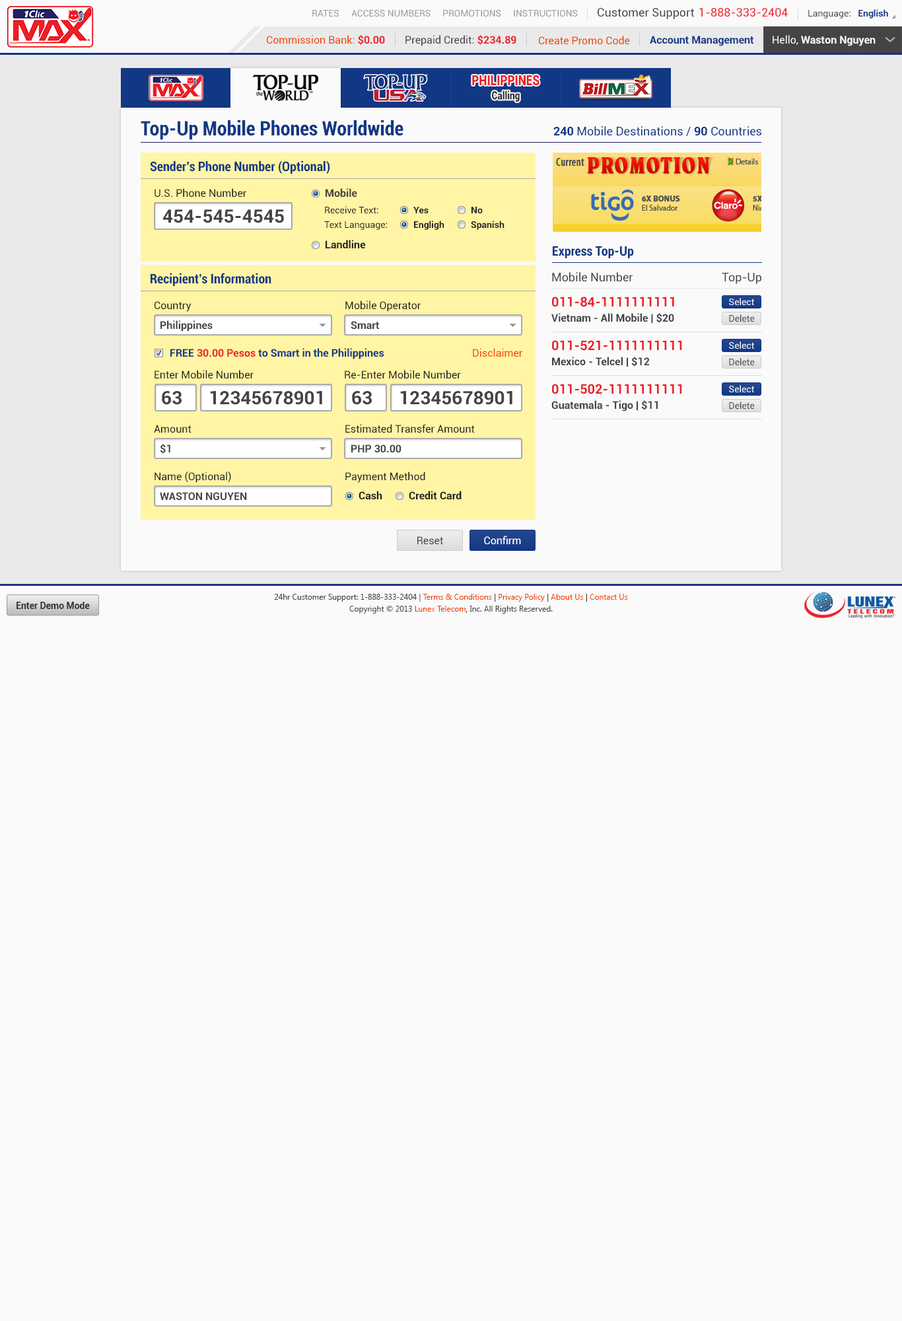
<style>
.page{position:relative;width:902px;height:1321px;background:#fafafa}
.page>*{position:absolute;margin:0}
.t1{font:9.2px "Roboto-Regular";color:#999999}
.t2{font:11.6px "Roboto-Regular";color:#444444}
.t3{font:11.6px "Roboto-Regular";color:#ec2029}
.t4{font:9.2px "Roboto-Regular";color:#444444}
.t5{font:9.2px "Roboto-Bold";color:#123785}
.t6{font:10.6px "Roboto-Regular";color:#ee4400}
.t7{font:10.6px "Roboto-Bold";color:#ec2028}
.t8{font:10.6px "Roboto-Regular";color:#444444}
.t9{font:10.6px "Roboto-Bold";color:#123785}
.t10{font:10.6px "Roboto-Bold";color:#fafafa}
.t11{font:10.6px "Roboto-Regular";color:#fafafa}
.t12{font:14.1px "Roboto-Black";color:#ec2028;scale:0.81 1}
.t13{font:11.3px "Roboto-Black";color:#333333;scale:0.81 1}
.t14{font:19.8px "Roboto-BoldCondensed";color:#123785}
.t15{font:11.9px "Roboto-Regular";color:#123785}
.t16{font:11.9px "Roboto-Bold";color:#123785}
.t17{font:13.2px "Roboto-BoldCondensed";color:#123785}
.t18{font:10.6px "Roboto-Regular";color:#222222}
.t19{font:10.6px "Roboto-Bold";color:#444444}
.t20{font:18.5px "Roboto-Bold";color:#444444}
.t21{font:9.2px "Roboto-Regular";color:#222222}
.t22{font:9.2px "Roboto-Bold";color:#222222}
.t23{font:10.6px "Roboto-Bold";color:#222222}
.t24{font:11.9px "Roboto-Regular";color:#444444}
.t25{font:13.2px "Roboto-Bold";color:#ec2129}
.t26{font:9.2px "Roboto-Regular";color:#fafafa}
.t27{font:10.6px "Roboto-Regular";color:#ffffff}
.t28{font:7.9px/11.9px "SegoeUI";color:#444444}
.t29{font:7.9px/11.9px "SegoeUI";color:#ee4400}
.t30{font:7.9px/11.9px "SegoeUI";color:#333333}
.t31{font:9.2px "Roboto-Bold";color:#333333}
</style>
<div class="page">
<p class="t1" style="left:312px;top:10px;width:27px;height:7px">RATES</p>
<p class="t1" style="left:351px;top:10px;width:80px;height:7px">ACCESS NUMBERS</p>
<p class="t1" style="left:443px;top:10px;width:58px;height:7px">PROMOTIONS</p>
<p class="t1" style="left:514px;top:10px;width:64px;height:7px">INSTRUCTIONS</p>
<p class="t2" style="left:598px;top:8px;width:96px;height:11px">Customer Support</p>
<p class="t3" style="left:700px;top:8px;width:88px;height:9px">1-888-333-2404</p>
<p class="t4" style="left:809px;top:9px;width:80px;height:9px">Language:   <span class="t5">English</span></p>
<p class="t6" style="left:267px;top:35px;width:118px;height:10px">Commission Bank: <span class="t7">$0.00</span></p>
<p class="t8" style="left:406px;top:35px;width:111px;height:11px">Prepaid Credit: <span class="t7">$234.89</span></p>
<p class="t6" style="left:539px;top:36px;width:91px;height:9px">Create Promo Code</p>
<p class="t9" style="left:650px;top:36px;width:104px;height:10px">Account Management</p>
<p class="t10" style="left:773px;top:35px;width:103px;height:11px"><span class="t11">Hello, </span>Waston Nguyen</p>
<p class="t12" style="left:472px;top:75px;width:68px;height:11px">PHILIPPINES</p>
<p class="t13" style="left:492px;top:91px;width:28px;height:11px">Calling</p>
<p class="t14" style="left:141px;top:120px;width:263px;height:20px">Top-Up Mobile Phones Worldwide</p>
<p class="t15" style="left:554px;top:126px;width:208px;height:10px"><span class="t16">240</span> Mobile Destinations / <span class="t16">90</span> Countries</p>
<p class="t17" style="left:150px;top:161px;width:180px;height:13px">Sender’s Phone Number (Optional)</p>
<p class="t18" style="left:155px;top:188px;width:91px;height:10px">U.S. Phone Number</p>
<p class="t19" style="left:326px;top:188px;width:31px;height:10px">Mobile</p>
<p class="t20" style="left:163px;top:209px;width:121px;height:14px">454-545-4545</p>
<p class="t21" style="left:325px;top:206px;width:54px;height:7px">Receive Text:</p>
<p class="t22" style="left:414px;top:207px;width:15px;height:6px">Yes</p>
<p class="t22" style="left:472px;top:207px;width:11px;height:6px">No</p>
<p class="t21" style="left:324px;top:221px;width:63px;height:9px">Text Language:</p>
<p class="t22" style="left:414px;top:221px;width:31px;height:9px">Engligh</p>
<p class="t22" style="left:471px;top:221px;width:34px;height:9px">Spanish</p>
<p class="t23" style="left:326px;top:240px;width:40px;height:9px">Landline</p>
<p class="t17" style="left:553px;top:246px;width:81px;height:12px">Express Top-Up</p>
<p class="t17" style="left:151px;top:273px;width:121px;height:13px">Recipient’s Information</p>
<p class="t24" style="left:552px;top:272px;width:82px;height:10px">Mobile Number</p>
<p class="t24" style="left:722px;top:273px;width:40px;height:11px">Top-Up</p>
<p class="t18" style="left:155px;top:301px;width:37px;height:11px">Country</p>
<p class="t18" style="left:346px;top:301px;width:75px;height:11px">Mobile Operator</p>
<p class="t25" style="left:552px;top:297px;width:123px;height:10px">011-84-1111111111</p>
<p class="t26" style="left:729px;top:298px;width:25px;height:7px">Select</p>
<p class="t19" style="left:552px;top:313px;width:123px;height:11px">Vietnam - All Mobile | $20</p>
<p class="t4" style="left:729px;top:314px;width:26px;height:8px">Delete</p>
<p class="t19" style="left:161px;top:320px;width:52px;height:12px">Philippines</p>
<p class="t19" style="left:351px;top:321px;width:29px;height:9px">Smart</p>
<p class="t25" style="left:552px;top:340px;width:130px;height:11px">011-521-1111111111</p>
<p class="t26" style="left:729px;top:342px;width:25px;height:7px">Select</p>
<p class="t9" style="left:170px;top:348px;width:215px;height:11px">FREE <span class="t7">30.00 Pesos</span> to Smart in the Philippines</p>
<p class="t6" style="left:473px;top:348px;width:50px;height:9px">Disclaimer</p>
<p class="t19" style="left:552px;top:357px;width:98px;height:10px">Mexico - Telcel | $12</p>
<p class="t4" style="left:729px;top:358px;width:26px;height:7px">Delete</p>
<p class="t18" style="left:155px;top:370px;width:99px;height:9px">Enter Mobile Number</p>
<p class="t18" style="left:345px;top:370px;width:116px;height:9px">Re-Enter Mobile Number</p>
<p class="t25" style="left:552px;top:384px;width:130px;height:10px">011-502-1111111111</p>
<p class="t26" style="left:729px;top:385px;width:25px;height:7px">Select</p>
<p class="t20" style="left:162px;top:391px;width:20px;height:14px">63</p>
<p class="t20" style="left:210px;top:391px;width:112px;height:14px">12345678901</p>
<p class="t20" style="left:352px;top:391px;width:20px;height:14px">63</p>
<p class="t20" style="left:400px;top:391px;width:113px;height:14px">12345678901</p>
<p class="t19" style="left:552px;top:400px;width:106px;height:12px">Guatemala - Tigo | $11</p>
<p class="t4" style="left:729px;top:402px;width:26px;height:7px">Delete</p>
<p class="t18" style="left:154px;top:425px;width:38px;height:8px">Amount</p>
<p class="t18" style="left:346px;top:424px;width:129px;height:9px">Estimated Transfer Amount</p>
<p class="t19" style="left:160px;top:444px;width:10px;height:10px">$1</p>
<p class="t19" style="left:351px;top:445px;width:51px;height:8px">PHP 30.00</p>
<p class="t18" style="left:155px;top:471px;width:76px;height:12px">Name (Optional)</p>
<p class="t18" style="left:346px;top:472px;width:79px;height:11px">Payment Method</p>
<p class="t19" style="left:160px;top:492px;width:87px;height:8px">WASTON NGUYEN</p>
<p class="t23" style="left:359px;top:491px;width:24px;height:9px">Cash</p>
<p class="t23" style="left:409px;top:491px;width:53px;height:9px">Credit Card</p>
<p class="t8" style="left:418px;top:536px;width:25px;height:8px">Reset</p>
<p class="t27" style="left:484px;top:536px;width:37px;height:8px">Confirm</p>
<p class="t28" style="left:274px;top:594px;width:354px;height:20px;text-align:center">24hr Customer Support: 1-888-333-2404 | <span class="t29">Terms &amp; Conditions</span><span class="t30"> | </span><span class="t29">Privacy Policy</span><span class="t30"> | </span><span class="t29">About Us</span><span class="t30"> | </span><span class="t29">Contact Us<br></span>Copyright © 2013 <span class="t29">Lunex Telecom</span><span class="t30">,</span> Inc. All Rights Reserved.</p>
<p class="t31" style="left:17px;top:602px;width:73px;height:7px">Enter Demo Mode</p>
</div>
